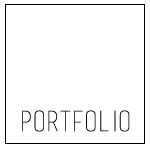
<style>
.page{position:relative;width:150px;height:150px;background:#ffffff}
.page>*{position:absolute;margin:0}
.t1{font:28.1px "basictitlefont";color:#000000}
</style>
<div class="page">
<p class="t1" style="left:22px;top:110px;width:108px;height:22px">portfolio</p>
</div>
